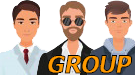
<style>
.page{position:relative;width:135px;height:75px;background:#ffffff}
.page>*{position:absolute;margin:0}
.t1{font:24px "Tahoma-Bold";letter-spacing:-0.065em;font-weight:bold;font-style:italic}
</style>
<div class="page">
<p class="t1" style="left:47px;top:55px;width:85px;height:19px">GROUP</p>
</div>
